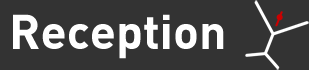
<style>
.page{position:relative;width:309px;height:70px;background:#333333}
.page>*{position:absolute;margin:0}
.t1{font:48px "DIN-Bold";color:#ffffff}
</style>
<div class="page">
<p class="t1" style="left:13px;top:14px;width:211px;height:45px">Reception</p>
</div>
